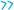
<style>
.page{position:relative;width:14px;height:10px;background:#ffffff}
.page>*{position:absolute;margin:0}
.t1{font:16px "ThrowMyHandsUpintheAir";color:#16a2dd;text-transform:uppercase}
</style>
<div class="page">
<p class="t1" style="left:0px;top:0px;width:14px;height:10px">&gt;&gt;</p>
</div>
